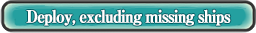
<style>
.page{position:relative;width:256px;height:33px}
.page>*{position:absolute;margin:0}
.t1{font:17px "RyuminPro-ExBold";letter-spacing:-0.08em;color:#ffffff;font-weight:bold;scale:0.9 1}
</style>
<div class="page">
<p class="t1" style="left:26px;top:9px;width:205px;height:17px">Deploy, excluding missing ships</p>
</div>
